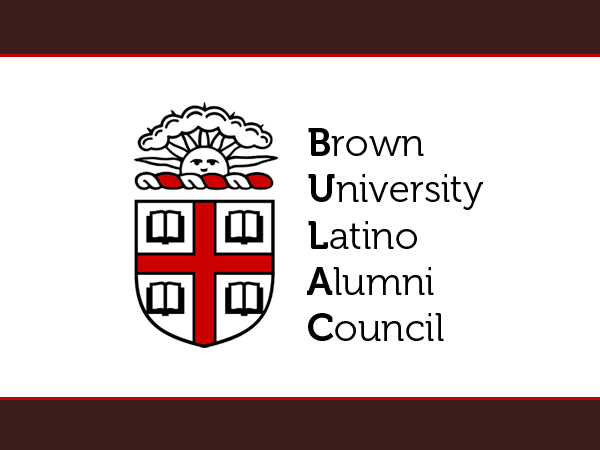
<style>
.page{position:relative;width:600px;height:450px;background:#ffffff}
.page>*{position:absolute;margin:0}
.t1{font:38.5px "Museo-300";color:#000000}
.t2{font:38.5px "Museo-700";color:#000000}
</style>
<div class="page">
<p class="t1" style="left:307px;top:128px;width:176px;height:213px"><span class="t2">B</span>rown<br><span class="t2">U</span>niversity<br><span class="t2">L</span>atino<br><span class="t2">A</span>lumni<br><span class="t2">C</span>ouncil</p>
</div>
